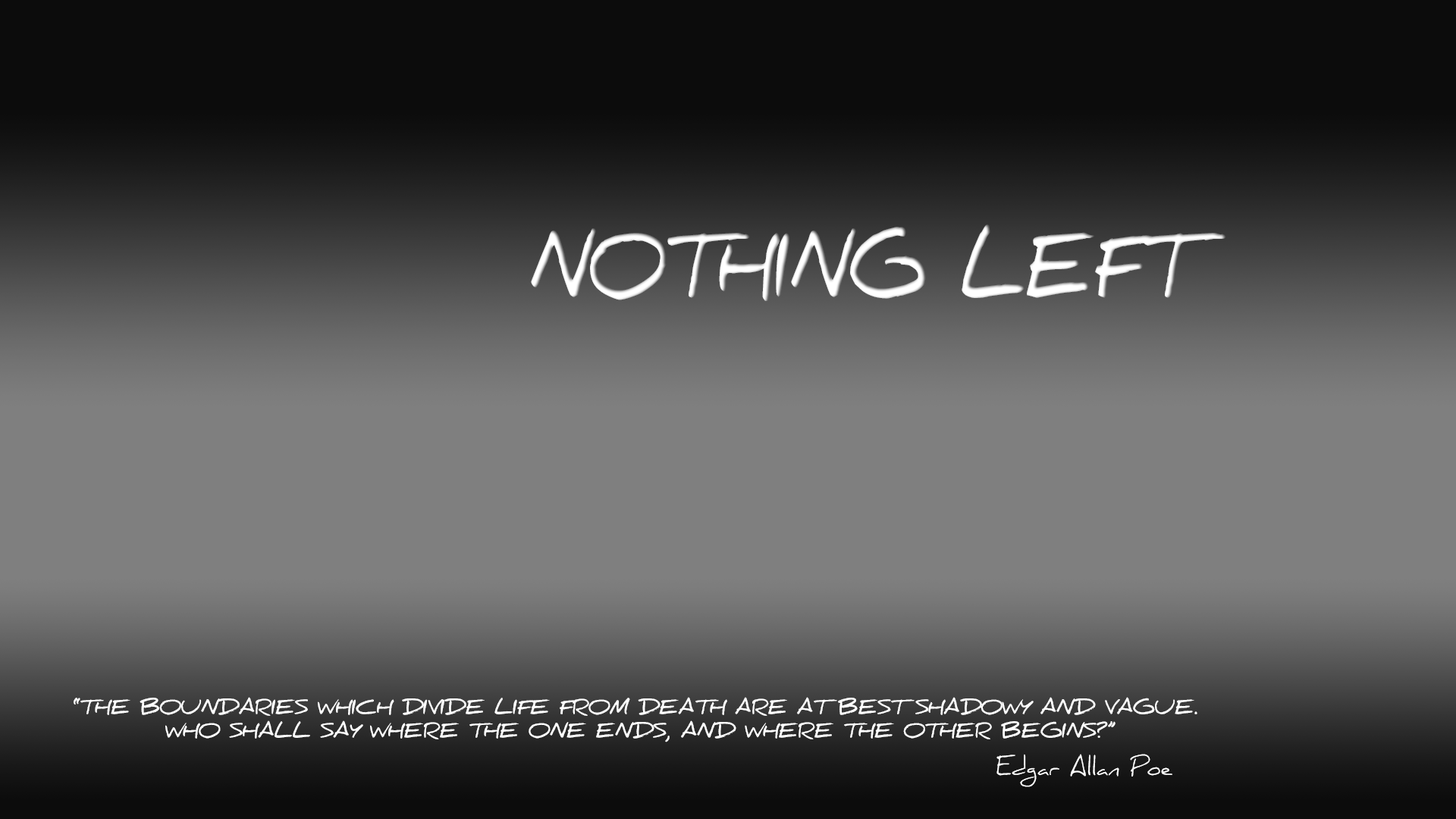
<style>
.page{position:relative;width:1456px;height:819px;background:#7f7f7f}
.page>*{position:absolute;margin:0}
.t1{font:87.2px "DanielBold";color:#ffffff;scale:0.8 1}
.t2{font:19.7px "DanielBold";color:#ffffff}
.t3{font:22.7px "Daniel";color:#ffffff}
</style>
<div class="page">
<p class="t1" style="left:531px;top:224px;width:695px;height:77px">NOTHING LEFT</p>
<p class="t2" style="left:74px;top:697px;width:1123px;height:45px;text-align:center">“THE BOUNDARIES WHICH DIVIDE LIFE FROM DEATH ARE AT BEST SHADOWY AND VAGUE. <br>WHO SHALL SAY WHERE THE ONE ENDS, AND WHERE THE OTHER BEGINS?”</p>
<p class="t3" style="left:996px;top:754px;width:176px;height:33px">Edgar Allan Poe</p>
</div>
